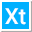
<style>
.page{position:relative;width:32px;height:32px;background:#00b0ff}
.page>*{position:absolute;margin:0}
.t1{font:22px "Roboto-Medium";color:#ffffff}
</style>
<div class="page">
<p class="t1" style="left:5px;top:8px;width:21px;height:17px">Xt</p>
</div>
